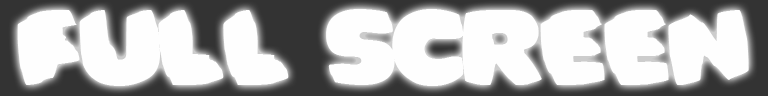
<style>
.page{position:relative;width:768px;height:96px;background:#fefefe}
.page>*{position:absolute;margin:0}
.t1{font:100px "Bomberman";color:#fefefe}
</style>
<div class="page">
<p class="t1" style="left:17px;top:9px;width:732px;height:77px">Full Screen</p>
</div>
